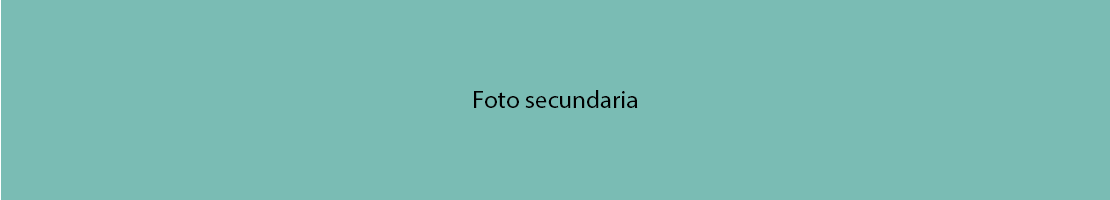
<style>
.page{position:relative;width:1110px;height:200px;background:#7abcb4}
.page>*{position:absolute;margin:0}
.t1{font:25px "MyriadPro-Regular";color:#000000}
</style>
<div class="page">
<p class="t1" style="left:474px;top:90px;width:164px;height:18px">Foto secundaria</p>
</div>
